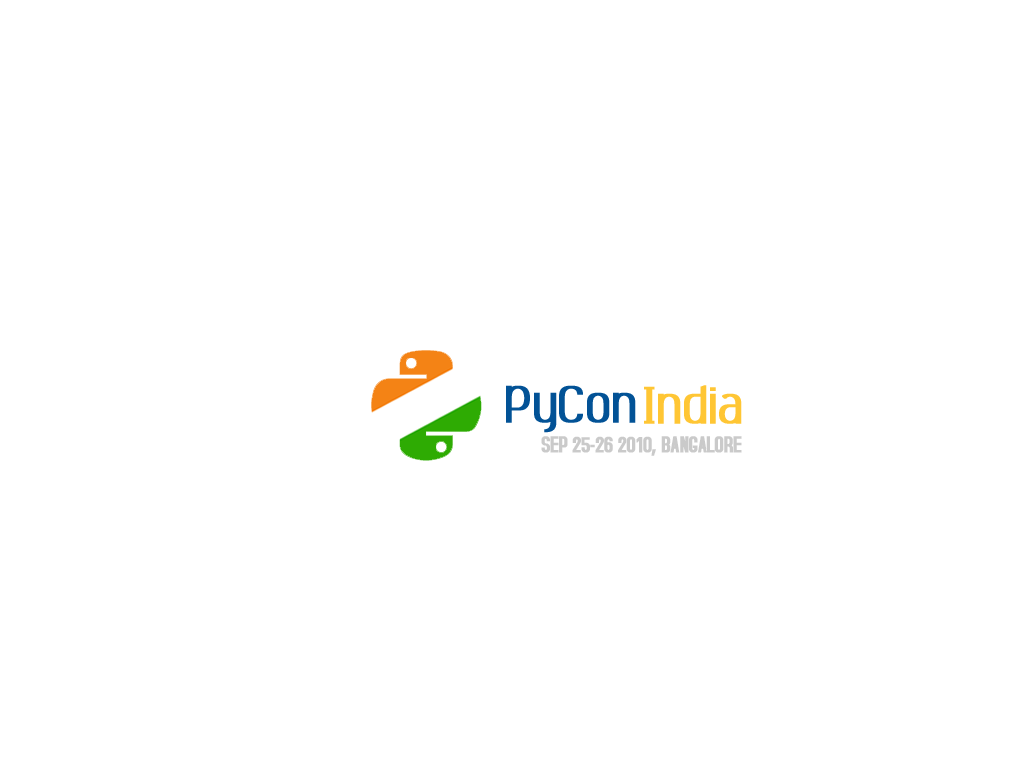
<style>
.page{position:relative;width:1024px;height:768px;background:#ffffff}
.page>*{position:absolute;margin:0}
.t1{font:60px "AmbrosiaDemo";letter-spacing:-0.025em;color:#025296;font-weight:bold}
.t2{font:60px "AmbrosiaDemo";letter-spacing:-0.025em;color:#ffc634;font-weight:bold}
.t3{font:24px "AccidentalPresidency";letter-spacing:-0.025em;color:#cacaca;text-transform:uppercase;font-weight:bold}
</style>
<div class="page">
<p class="t1" style="left:506px;top:385px;width:130px;height:48px">PyCon</p>
<p class="t2" style="left:644px;top:385px;width:98px;height:39px">India</p>
<p class="t3" style="left:541px;top:436px;width:201px;height:20px">sep 25-26 2010, Bangalore</p>
</div>
